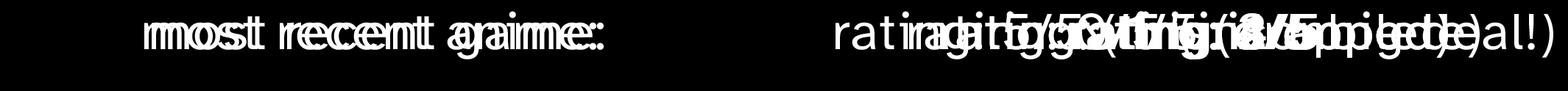
<style>
.page{position:relative;width:1568px;height:91px;background:#000000}
.page>*{position:absolute;margin:0}
.t1{font:53px "AtkinsonHyperlegible-Regular";letter-spacing:0.02em;color:#ffffff}
</style>
<div class="page">
<p class="t1" style="left:144px;top:11px;width:460px;height:39px">most recent anime:</p>
<p class="t1" style="left:152px;top:16px;width:444px;height:44px">most recent game:</p>
<p class="t1" style="left:836px;top:11px;width:717px;height:49px">rating: 5/5 (this is a big deal!)</p>
<p class="t1" style="left:909px;top:11px;width:571px;height:49px">rating: 0/5 (incomplete)</p>
<p class="t1" style="left:940px;top:11px;width:508px;height:49px">rating: -1/5 (dropped)</p>
<p class="t1" style="left:940px;top:11px;width:508px;height:49px">rating: -1/5 (dropped)</p>
<p class="t1" style="left:1070px;top:11px;width:248px;height:49px">rating: 4/5</p>
<p class="t1" style="left:1071px;top:11px;width:246px;height:49px">rating: 3/5</p>
<p class="t1" style="left:1072px;top:11px;width:244px;height:49px">rating: 2/5</p>
<p class="t1" style="left:1076px;top:11px;width:237px;height:49px">rating: 1/5</p>
</div>
